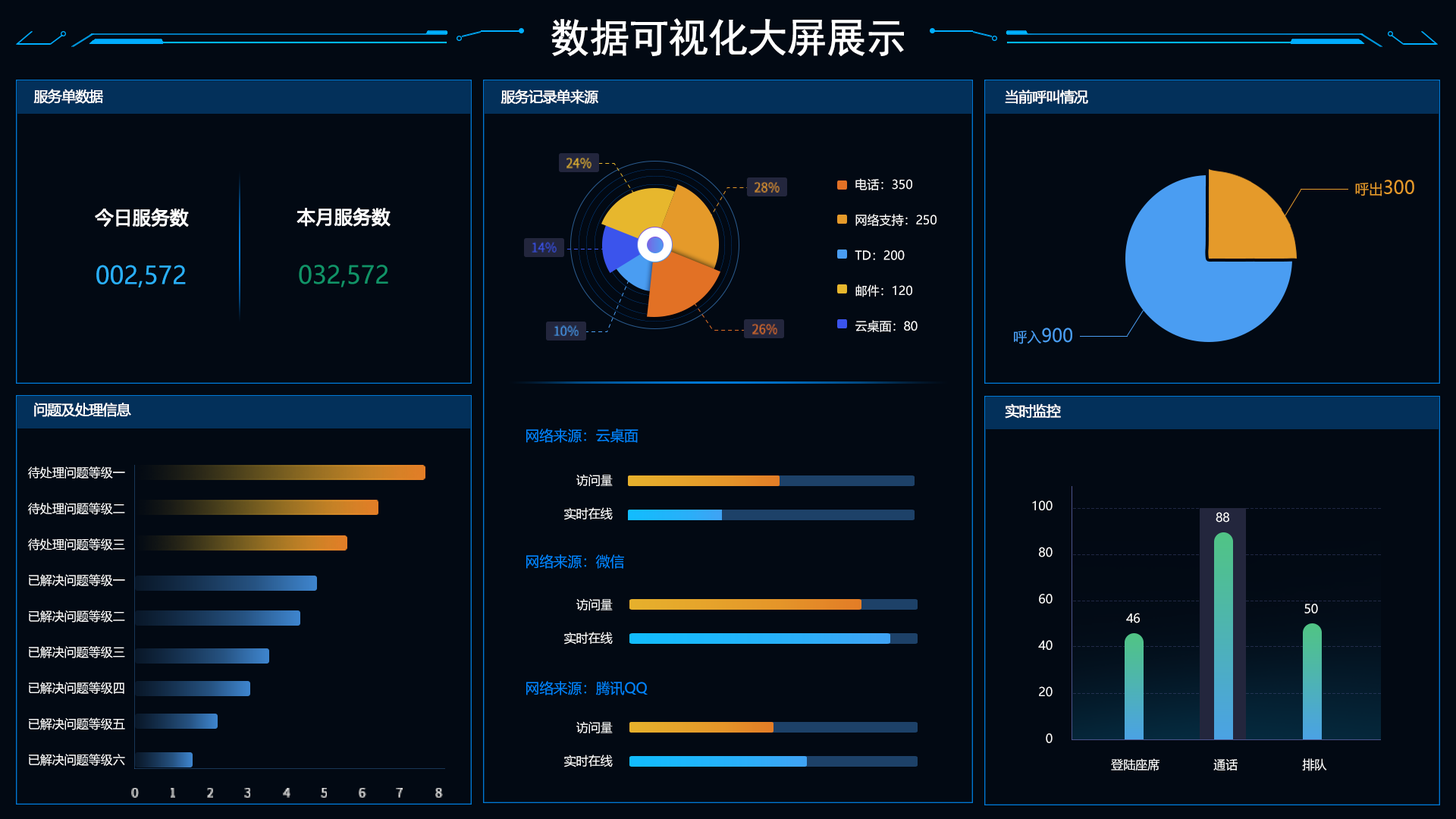
<style>
.page{position:relative;width:1456px;height:819px;background:#020913}
.page>*{position:absolute;margin:0}
.t1{font:40.4px "SimHei";letter-spacing:-0.05em;color:#ffffff;font-weight:bold}
.t2{font:14.2px "MicrosoftYaHei";letter-spacing:-0.05em;color:#ffffff;font-weight:bold}
.t3{font:12.7px "SourceHanSansCN-Regular";color:#e7b72d;text-transform:uppercase}
.t4{font:12.7px "SourceHanSansCN-Regular";color:#e59a2a;text-transform:uppercase}
.t5{font:9.1px/35.4px "MicrosoftYaHei";color:#ffffff}
.t6{font:12.1px/35.4px "MicrosoftYaHei";color:#ffffff}
.t7{font:18.2px "MicrosoftYaHei";color:#e59a2a}
.t8{font:14.2px "MicrosoftYaHei";color:#e59a2a}
.t9{font:18.2px "MicrosoftYaHei";color:#ffffff;font-weight:bold}
.t10{font:12.7px "SourceHanSansCN-Regular";color:#3b54ec;text-transform:uppercase}
.t11{font:24.3px "MicrosoftYaHei";color:#2aaff9}
.t12{font:24.3px "MicrosoftYaHei";color:#119367}
.t13{font:12.7px "SourceHanSansCN-Regular";color:#4a9df2;text-transform:uppercase}
.t14{font:12.7px "SourceHanSansCN-Regular";color:#e27125;text-transform:uppercase}
.t15{font:18.2px "MicrosoftYaHei";color:#4a9df2}
.t16{font:14.2px "MicrosoftYaHei";color:#4a9df2}
.t17{font:14.2px "MicrosoftYaHei";color:#0184fe}
.t18{font:9.1px/35.9px "MicrosoftYaHei";color:#ffffff}
.t19{font:12.1px/33.4px "MicrosoftYaHei";color:#ffffff}
.t20{font:12.1px/46.5px "MicrosoftYaHei";color:#fefefe}
.t21{font:9.1px "MicrosoftYaHei";color:#ffffff}
.t22{font:12.6px "SourceHanSansCN-Medium";color:#e6e6e6;text-transform:uppercase}
.t23{font:12.6px "SourceHanSansCN-Medium";text-transform:uppercase}
</style>
<div class="page">
<p class="t1" style="left:551px;top:18px;width:353px;height:38px">数据可视化大屏展示</p>
<p class="t2" style="left:33px;top:89px;width:70px;height:15px">服务单数据</p>
<p class="t2" style="left:500px;top:89px;width:98px;height:15px">服务记录单来源</p>
<p class="t2" style="left:1005px;top:89px;width:83px;height:15px">当前呼叫情况</p>
<p class="t3" style="left:566px;top:158px;width:25px;height:10px">24%</p>
<p class="t4" style="left:755px;top:182px;width:25px;height:11px">28%</p>
<p class="t5" style="left:855px;top:178px;width:82px;height:154px"><span class="t6">电话：350<br></span>网络支持：250<br>TD：200<br>邮件：120<br>云桌面：80</p>
<p class="t7" style="left:1355px;top:180px;width:59px;height:16px"><span class="t8">呼出</span>300</p>
<p class="t9" style="left:95px;top:208px;width:94px;height:19px">今日服务数</p>
<p class="t9" style="left:297px;top:207px;width:94px;height:20px">本月服务数</p>
<p class="t10" style="left:532px;top:242px;width:25px;height:11px">14%</p>
<p class="t11" style="left:96px;top:265px;width:90px;height:22px">002,572</p>
<p class="t12" style="left:299px;top:265px;width:89px;height:22px">032,572</p>
<p class="t13" style="left:554px;top:325px;width:25px;height:11px">10%</p>
<p class="t14" style="left:752px;top:324px;width:25px;height:10px">26%</p>
<p class="t15" style="left:1014px;top:328px;width:58px;height:16px"><span class="t16">呼入</span>900</p>
<p class="t2" style="left:34px;top:403px;width:97px;height:14px">问题及处理信息</p>
<p class="t2" style="left:1005px;top:403px;width:56px;height:16px">实时监控</p>
<p class="t17" style="left:526px;top:428px;width:113px;height:15px">网络来源：云桌面</p>
<p class="t18" style="left:28px;top:466px;width:97px;height:300px;text-align:right">待处理问题等级一<br>待处理问题等级二<br>待处理问题等级三<br>已解决问题等级一<br>已解决问题等级二<br>已解决问题等级三<br>已解决问题等级四<br>已解决问题等级五<br>已解决问题等级六</p>
<p class="t19" style="left:564px;top:474px;width:49px;height:46px;text-align:right">访问量<br>实时在线</p>
<p class="t20" style="left:1032px;top:500px;width:21px;height:243px;text-align:right">100<br>80<br>60<br>40<br>20<br>0</p>
<p class="t21" style="left:1216px;top:512px;width:13px;height:10px">88</p>
<p class="t17" style="left:526px;top:554px;width:98px;height:15px">网络来源：微信</p>
<p class="t19" style="left:564px;top:598px;width:49px;height:47px;text-align:right">访问量<br>实时在线</p>
<p class="t21" style="left:1304px;top:604px;width:14px;height:9px">50</p>
<p class="t21" style="left:1126px;top:613px;width:14px;height:10px">46</p>
<p class="t17" style="left:526px;top:681px;width:122px;height:14px">网络来源：腾讯QQ</p>
<p class="t19" style="left:564px;top:721px;width:49px;height:46px;text-align:right">访问量<br>实时在线</p>
<p class="t21" style="left:1111px;top:758px;width:216px;height:13px">登陆座席               通话                  排队</p>
<p class="t22" style="left:131px;top:788px;width:8px;height:10px">0</p>
<p class="t23" style="left:171px;top:788px;width:4px;height:10px">1</p>
<p class="t22" style="left:207px;top:788px;width:6px;height:10px">2</p>
<p class="t22" style="left:244px;top:788px;width:6px;height:10px">3</p>
<p class="t22" style="left:283px;top:788px;width:7px;height:10px">4</p>
<p class="t22" style="left:321px;top:788px;width:6px;height:10px">5</p>
<p class="t22" style="left:359px;top:788px;width:7px;height:10px">6</p>
<p class="t22" style="left:396px;top:788px;width:7px;height:10px">7</p>
<p class="t22" style="left:435px;top:788px;width:8px;height:10px">8</p>
</div>
